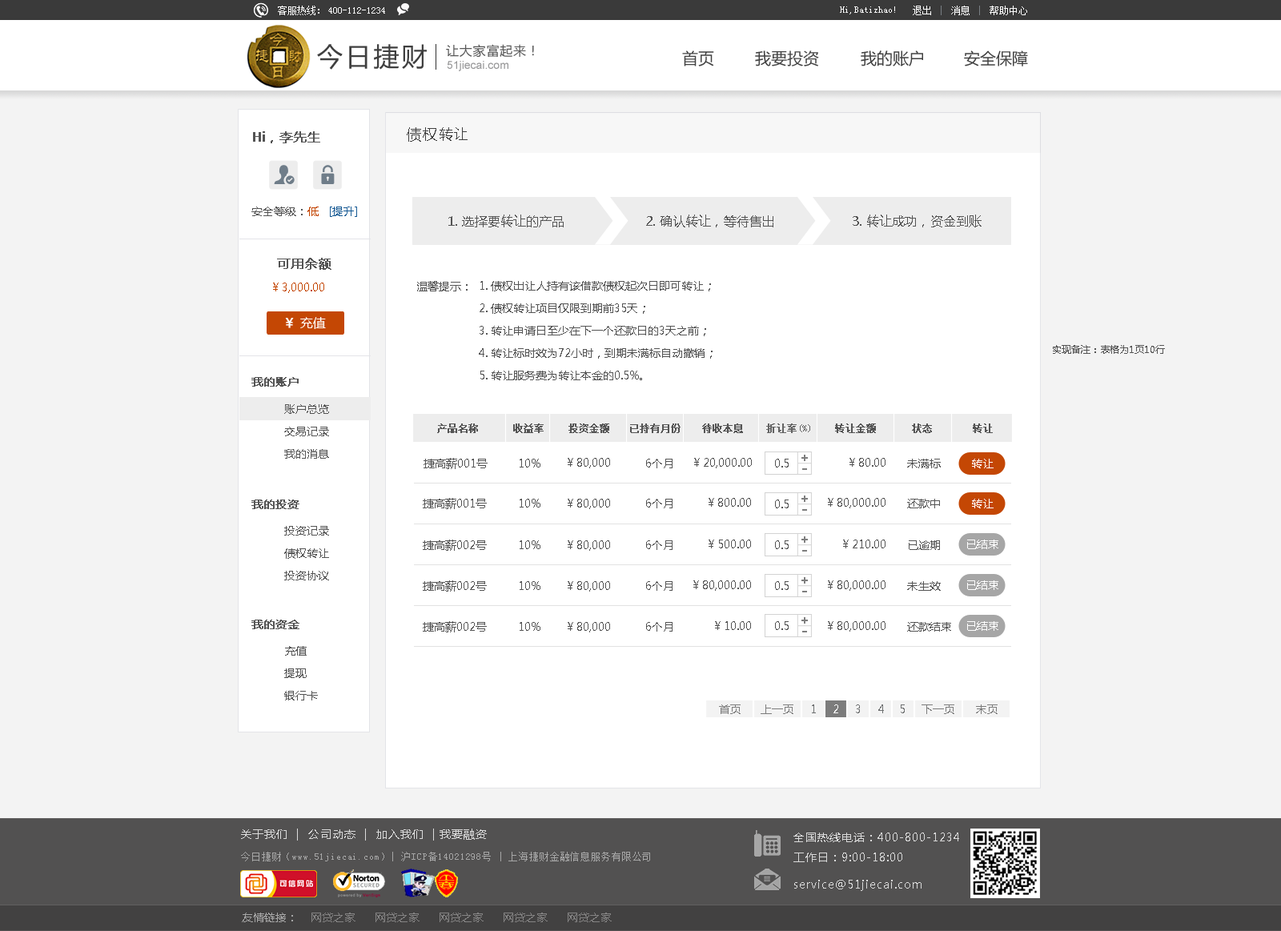
<style>
.page{position:relative;width:1281px;height:931px;background:#ffffff}
.page>*{position:absolute;margin:0}
.t1{font:9.6px "SimSun";color:#ffffff}
.t2{font:25.6px "MicrosoftYaHei";letter-spacing:0.1em;color:#3f3f3f}
.t3{font:12.8px "MicrosoftYaHei";letter-spacing:0.05em;color:#575757}
.t4{font:16px "MicrosoftYaHei";color:#414141}
.t5{font:11.2px "ArialMT";color:#969697}
.t6{font:12.8px "MicrosoftYaHei";color:#545454;font-weight:bold}
.t7{font:14.4px "MicrosoftYaHei";letter-spacing:0.1em;color:#3f3f3f}
.t8{font:11.2px "MicrosoftYaHei";color:#545454}
.t9{font:11.2px "MicrosoftYaHei";color:#c44704}
.t10{font:11.2px "MicrosoftYaHei";color:#175a94}
.t11{font:12.8px "MicrosoftYaHei";color:#545454}
.t12{font:11.2px/22.4px "MicrosoftYaHei";color:#545454}
.t13{font:11.2px "MicrosoftYaHei";color:#c44703}
.t14{font:12.8px "MicrosoftYaHei";color:#ffffff}
.t15{font:12.8px "MicrosoftYaHei";color:#ffffff;font-weight:bold}
.t16{font:9.6px "MicrosoftYaHei";color:#545454}
.t17{font:11.2px "MicrosoftYaHei";color:#545454;font-weight:bold}
.t18{font:9.6px "SimSun";color:#545454;font-weight:bold}
.t19{font:9.6px "SimSun";color:#545454}
.t20{font:11.2px "MicrosoftYaHei";color:#ffffff}
.t21{font:11.2px "MicrosoftYaHei";letter-spacing:0.07em;color:#dbdbdb}
.t22{font:11.2px "MicrosoftYaHei";letter-spacing:0.07em;color:#dadada}
.t23{font:9.6px "SimSun";letter-spacing:0.07em;color:#a7a7a7}
.t24{font:11.2px "MicrosoftYaHei";color:#858484}
.t25{font:11.2px "MicrosoftYaHei";color:#a7a7a7}
</style>
<div class="page">
<p class="t1" style="left:278px;top:6px;width:41px;height:9px">客服热线：</p>
<p class="t1" style="left:913px;top:6px;width:114px;height:9px">退出    消息    帮助中心</p>
<p class="t1" style="left:328px;top:7px;width:57px;height:7px">400-112-1234</p>
<p class="t1" style="left:840px;top:6px;width:55px;height:8px">Hi,Batizhao!</p>
<p class="t2" style="left:317px;top:44px;width:110px;height:26px">今日捷财</p>
<p class="t3" style="left:446px;top:44px;width:88px;height:13px">让大家富起来！</p>
<p class="t4" style="left:682px;top:50px;width:32px;height:16px">首页</p>
<p class="t4" style="left:755px;top:50px;width:64px;height:16px">我要投资</p>
<p class="t4" style="left:861px;top:50px;width:62px;height:16px">我的账户</p>
<p class="t4" style="left:964px;top:50px;width:64px;height:16px">安全保障</p>
<p class="t5" style="left:447px;top:61px;width:61px;height:10px">51jiecai.com</p>
<p class="t6" style="left:253px;top:131px;width:67px;height:12px">Hi，李先生</p>
<p class="t7" style="left:407px;top:127px;width:60px;height:15px">债权转让</p>
<p class="t8" style="left:251px;top:207px;width:106px;height:10px">安全等级：<span class="t9">低   </span><span class="t10">[提升]</span></p>
<p class="t11" style="left:448px;top:215px;width:116px;height:12px">1. 选择要转让的产品</p>
<p class="t11" style="left:646px;top:215px;width:127px;height:12px">2. 确认转让，等待售出</p>
<p class="t11" style="left:853px;top:215px;width:128px;height:12px">3. 转让成功，资金到账</p>
<p class="t6" style="left:277px;top:258px;width:54px;height:12px">可用余额</p>
<p class="t8" style="left:417px;top:281px;width:50px;height:10px">温馨提示：</p>
<p class="t12" style="left:479px;top:281px;width:233px;height:99px">1. 债权出让人持有该借款债权起次日即可转让；<br>2. 债权转让项目仅限到期前35天；<br>3. 转让申请日至少在下一个还款日的3天之前；<br>4. 转让标时效为72小时，到期未满标自动撤销；<br>5. 转让服务费为转让本金的0.5%。</p>
<p class="t13" style="left:273px;top:283px;width:51px;height:10px">￥3,000.00</p>
<p class="t14" style="left:285px;top:317px;width:41px;height:12px"><span class="t15">￥ </span>充值</p>
<p class="t16" style="left:1053px;top:345px;width:112px;height:9px">实现备注：表格为1页10行</p>
<p class="t17" style="left:251px;top:377px;width:48px;height:10px">我的账户</p>
<p class="t12" style="left:284px;top:404px;width:45px;height:55px">账户总览<br>交易记录<br>我的消息</p>
<p class="t18" style="left:437px;top:423px;width:41px;height:10px">产品名称</p>
<p class="t18" style="left:513px;top:423px;width:31px;height:10px">收益率</p>
<p class="t18" style="left:568px;top:423px;width:41px;height:10px">投资金额</p>
<p class="t18" style="left:630px;top:423px;width:50px;height:10px">已持有月份</p>
<p class="t18" style="left:702px;top:423px;width:41px;height:10px">待收本息</p>
<p class="t18" style="left:766px;top:423px;width:44px;height:10px;opacity:0.9">折让率<span class="t19">(%)</span></p>
<p class="t18" style="left:835px;top:423px;width:41px;height:10px">转让金额</p>
<p class="t18" style="left:912px;top:423px;width:20px;height:10px">状态</p>
<p class="t18" style="left:973px;top:423px;width:20px;height:10px">转让</p>
<p class="t8" style="left:423px;top:458px;width:65px;height:11px">捷高薪001号</p>
<p class="t8" style="left:520px;top:459px;width:20px;height:8px">10%</p>
<p class="t8" style="left:568px;top:458px;width:42px;height:10px">￥80,000</p>
<p class="t8" style="left:646px;top:459px;width:26px;height:9px">6个月</p>
<p class="t8" style="left:694px;top:458px;width:58px;height:10px">￥20,000.00</p>
<p class="t8" style="left:775px;top:459px;width:14px;height:8px">0.5</p>
<p class="t8" style="left:849px;top:458px;width:36px;height:9px">￥80.00</p>
<p class="t8" style="left:907px;top:459px;width:34px;height:9px">未满标</p>
<p class="t20" style="left:972px;top:459px;width:21px;height:9px">转让</p>
<p class="t8" style="left:423px;top:498px;width:64px;height:11px">捷高薪001号</p>
<p class="t8" style="left:708px;top:498px;width:43px;height:9px">￥800.00</p>
<p class="t8" style="left:828px;top:498px;width:57px;height:10px">￥80,000.00</p>
<p class="t17" style="left:251px;top:500px;width:48px;height:9px">我的投资</p>
<p class="t8" style="left:520px;top:499px;width:20px;height:9px">10%</p>
<p class="t8" style="left:568px;top:499px;width:42px;height:10px">￥80,000</p>
<p class="t8" style="left:646px;top:499px;width:26px;height:9px">6个月</p>
<p class="t8" style="left:775px;top:500px;width:14px;height:8px">0.5</p>
<p class="t8" style="left:907px;top:499px;width:33px;height:9px">还款中</p>
<p class="t20" style="left:972px;top:499px;width:21px;height:9px">转让</p>
<p class="t12" style="left:284px;top:526px;width:45px;height:54px">投资记录<br>债权转让<br>投资协议</p>
<p class="t8" style="left:423px;top:540px;width:64px;height:11px">捷高薪002号</p>
<p class="t8" style="left:520px;top:540px;width:20px;height:9px">10%</p>
<p class="t8" style="left:568px;top:540px;width:42px;height:11px">￥80,000</p>
<p class="t8" style="left:646px;top:540px;width:26px;height:10px">6个月</p>
<p class="t8" style="left:708px;top:540px;width:43px;height:8px">￥500.00</p>
<p class="t8" style="left:775px;top:540px;width:14px;height:9px">0.5</p>
<p class="t8" style="left:843px;top:540px;width:42px;height:8px">￥210.00</p>
<p class="t8" style="left:909px;top:540px;width:31px;height:10px">已逾期</p>
<p class="t20" style="left:967px;top:540px;width:31px;height:9px">已结束</p>
<p class="t8" style="left:423px;top:580px;width:64px;height:12px">捷高薪002号</p>
<p class="t8" style="left:520px;top:581px;width:20px;height:9px">10%</p>
<p class="t8" style="left:568px;top:581px;width:42px;height:11px">￥80,000</p>
<p class="t8" style="left:646px;top:581px;width:26px;height:10px">6个月</p>
<p class="t8" style="left:693px;top:580px;width:58px;height:11px">￥80,000.00</p>
<p class="t8" style="left:775px;top:581px;width:14px;height:9px">0.5</p>
<p class="t8" style="left:828px;top:580px;width:57px;height:11px">￥80,000.00</p>
<p class="t8" style="left:907px;top:581px;width:34px;height:10px">未生效</p>
<p class="t20" style="left:967px;top:580px;width:31px;height:10px">已结束</p>
<p class="t17" style="left:251px;top:620px;width:48px;height:9px">我的资金</p>
<p class="t8" style="left:423px;top:621px;width:64px;height:11px">捷高薪002号</p>
<p class="t8" style="left:520px;top:622px;width:20px;height:9px">10%</p>
<p class="t8" style="left:568px;top:622px;width:42px;height:10px">￥80,000</p>
<p class="t8" style="left:646px;top:622px;width:26px;height:10px">6个月</p>
<p class="t8" style="left:715px;top:621px;width:36px;height:9px">￥10.00</p>
<p class="t8" style="left:775px;top:621px;width:14px;height:9px">0.5</p>
<p class="t8" style="left:828px;top:621px;width:57px;height:11px">￥80,000.00</p>
<p class="t8" style="left:907px;top:622px;width:44px;height:10px">还款结束</p>
<p class="t20" style="left:967px;top:621px;width:31px;height:10px">已结束</p>
<p class="t12" style="left:284px;top:646px;width:34px;height:54px">充值<br>提现<br>银行卡</p>
<p class="t21" style="left:241px;top:829px;width:246px;height:12px">关于我们  |  公司动态  |  加入我们  | 我要融资</p>
<p class="t22" style="left:793px;top:833px;width:166px;height:29px">全国热线电话：400-800-1234<br>工作日：9:00-18:00</p>
<p class="t23" style="left:241px;top:852px;width:409px;height:9px">今日捷财（www.51jiecai.com）| 沪ICP备14021298号 | 上海捷财金融信息服务有限公司</p>
<p class="t22" style="left:794px;top:880px;width:127px;height:11px">service@51jiecai.com</p>
<p class="t24" style="left:242px;top:913px;width:370px;height:9px"><span class="t25">友情链接：</span>    网贷之家      网贷之家      网贷之家      网贷之家      网贷之家</p>
</div>
